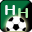
<style>
.page{position:relative;width:32px;height:32px;background:#046f3a}
.page>*{position:absolute;margin:0}
.t1{font:14px "ArialRoundedMTBold";color:#f8fafc;scale:1.12 1}
.t2{font:14px "ArialRoundedMTBold";color:#aeefab;scale:1.12 1}
</style>
<div class="page">
<p class="t1" style="left:5px;top:5px;width:10px;height:10px">H</p>
<p class="t2" style="left:18px;top:8px;width:10px;height:10px">H</p>
</div>
